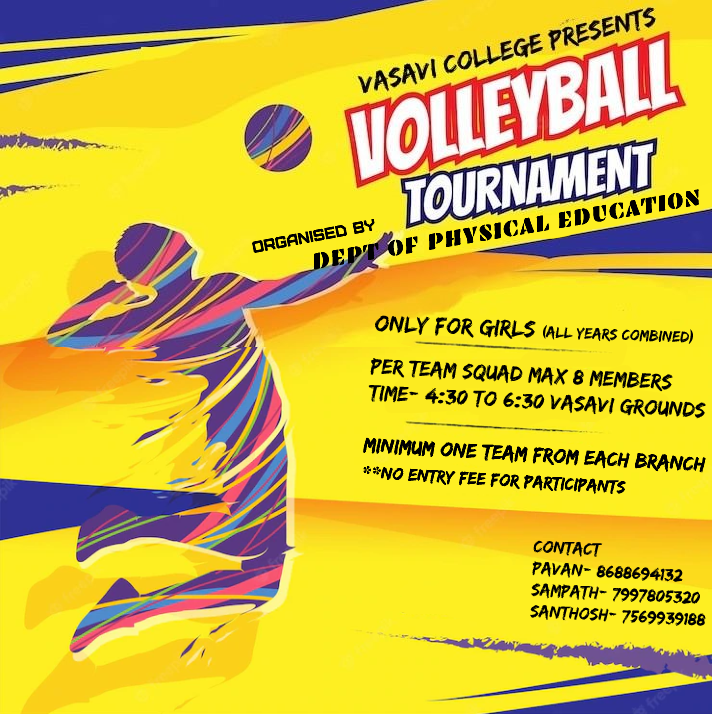
<style>
.page{position:relative;width:712px;height:714px}
.page>*{position:absolute;margin:0}
.t1{font:23px "EmblemaOne-Regular";color:#000000}
.t2{font:16px "Furore";color:#000000}
.t3{font:22px "Edo";color:#000000}
.t4{font:22px "EmblemaOne-Regular";color:#000000}
.t5{font:21px "Edo";color:#000000}
.t6{font:18px "EmblemaOne-Regular";color:#000000}
.t7{font:18px "Edo";color:#000000}
</style>
<div class="page">
<p class="t1" style="left:313px;top:189px;width:386px;height:81px;rotate:-9deg">DEPT OF PHYSICAL EDUCATION</p>
<p class="t2" style="left:252px;top:218px;width:123px;height:35px;rotate:-11deg">ORGANISED BY</p>
<p class="t3" style="left:368px;top:357px;width:339px;height:62px;rotate:3deg">per team squad max 8 members<br>time- 4<span class="t4">:</span>30 to 6<span class="t4">:</span>30 vasavi grounds</p>
<p class="t5" style="left:363px;top:437px;width:343px;height:58px;rotate:3deg">minimum one team from each branch<br><span class="t6">**</span><span class="t7">no entry fee for participants</span></p>
<p class="t7" style="left:530px;top:540px;width:176px;height:86px;rotate:3deg">contact:<br>pavan- 8688694132<br>sampath- 7997805320<br>santhosh- 7569939188</p>
</div>
